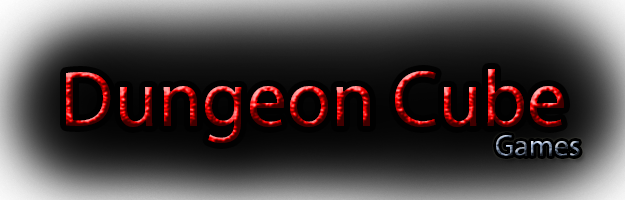
<style>
.page{position:relative;width:625px;height:200px}
.page>*{position:absolute;margin:0}
.t1{font:80px "MyriadPro-Regular"}
.t2{font:30px "MyriadPro-Regular"}
</style>
<div class="page">
<p class="t1" style="left:66px;top:69px;width:498px;height:74px">Dungeon Cube</p>
<p class="t2" style="left:496px;top:135px;width:84px;height:21px">Games</p>
</div>
